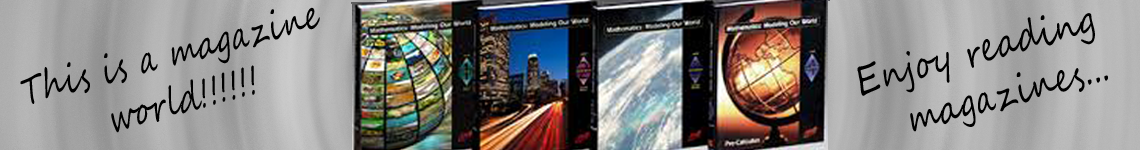
<style>
.page{position:relative;width:1140px;height:150px}
.page>*{position:absolute;margin:0}
.t1{font:40.1px "SegoeScript";letter-spacing:0.025em;color:#000000;scale:0.72 1}
.t2{font:41.1px "SegoeScript";letter-spacing:0.025em;color:#000000;scale:0.77 1}
</style>
<div class="page">
<p class="t1" style="left:20px;top:7px;width:300px;height:126px;text-align:center;rotate:-15deg">This is a magazine <br>world!!!!!!</p>
<p class="t2" style="left:857px;top:13px;width:251px;height:119px;text-align:center;rotate:-15deg">Enjoy reading <br>  magazines...</p>
</div>
